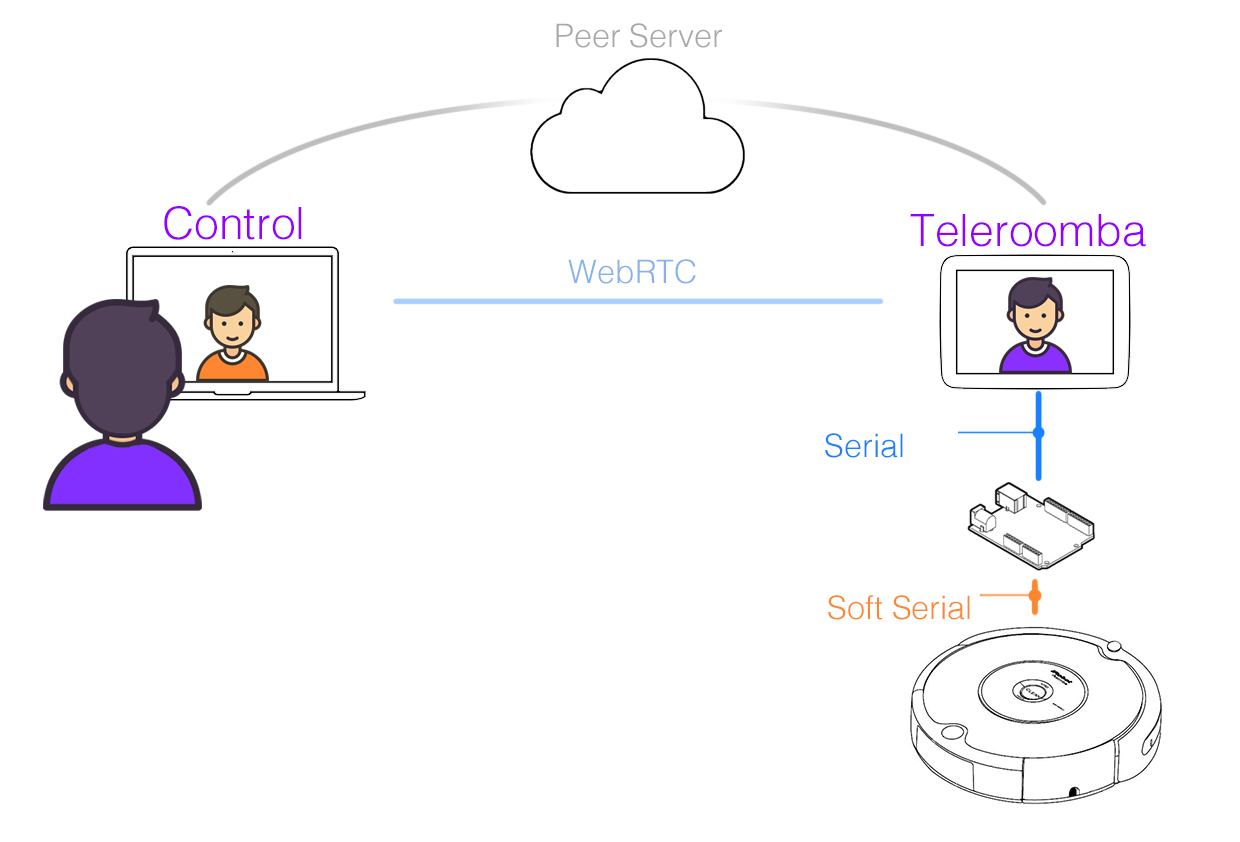
<style>
.page{position:relative;width:1240px;height:842px;background:#ffffff}
.page>*{position:absolute;margin:0}
.t1{font:32.2px "Helvetica-Light";color:#a8a8a8}
.t2{font:44.4px "Helvetica-Light";color:#9600ff}
.t3{font:32.2px "Helvetica-Light";color:#86b1eb}
.t4{font:32.2px "Helvetica-Light";color:#1980ff}
.t5{font:32.2px "Helvetica-Light";color:#ff8630}
</style>
<div class="page">
<p class="t1" style="left:556px;top:23px;width:166px;height:25px">Peer Server</p>
<p class="t2" style="left:164px;top:206px;width:138px;height:34px">Control</p>
<p class="t2" style="left:910px;top:214px;width:236px;height:33px">Teleroomba</p>
<p class="t3" style="left:568px;top:259px;width:128px;height:25px">WebRTC</p>
<p class="t4" style="left:825px;top:433px;width:78px;height:25px">Serial</p>
<p class="t5" style="left:828px;top:595px;width:142px;height:25px">Soft Serial</p>
</div>
